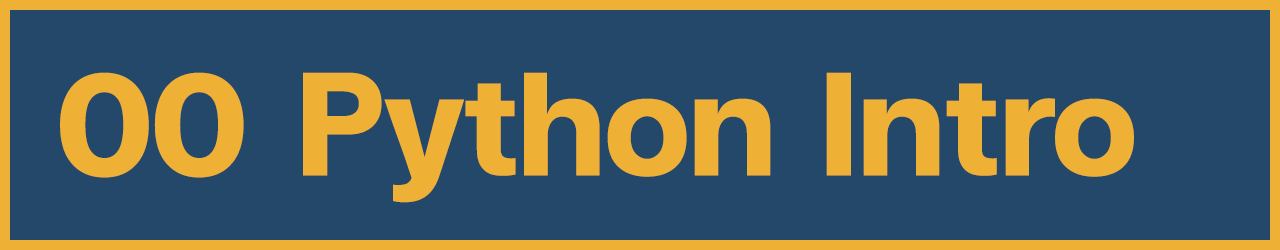
<style>
.page{position:relative;width:1280px;height:250px;background:#23486a}
.page>*{position:absolute;margin:0}
.t1{font:200px "FCMinimalBold";color:#efb036}
</style>
<div class="page">
<p class="t1" style="left:60px;top:72px;width:184px;height:106px">00</p>
<p class="t1" style="left:303px;top:72px;width:831px;height:131px">Python Intro</p>
</div>
